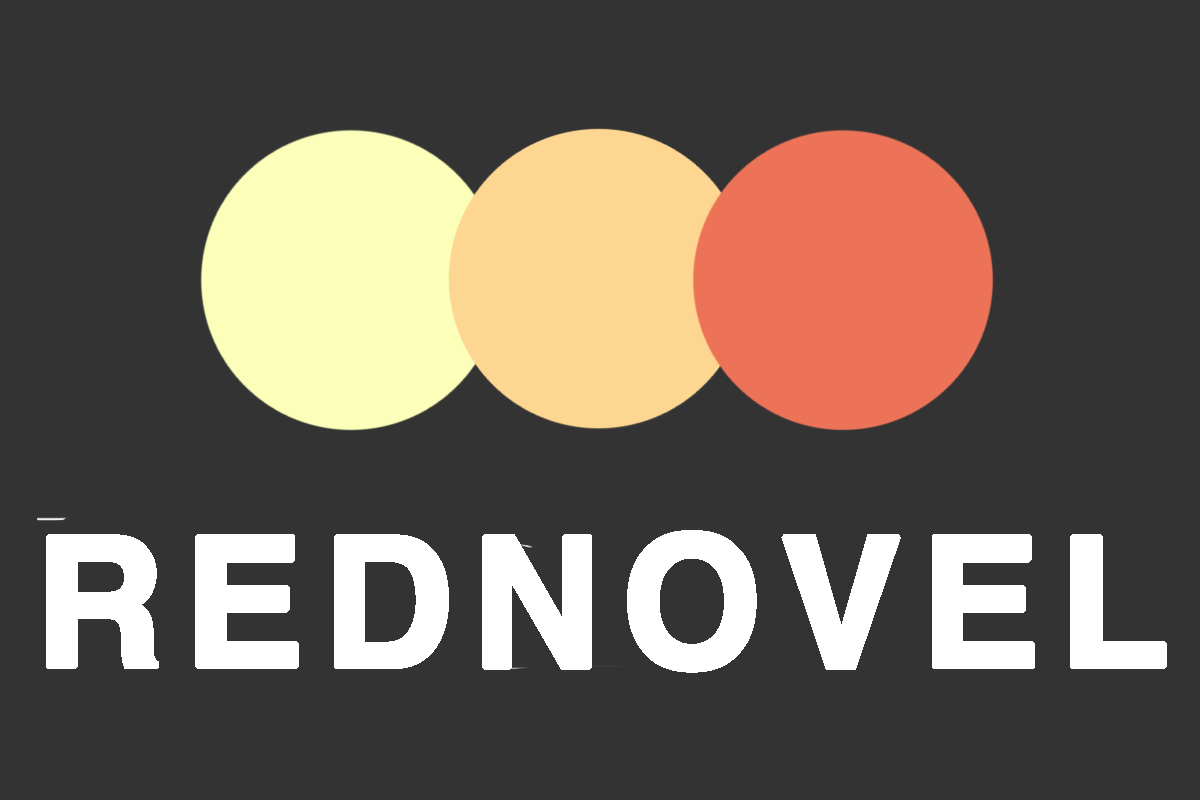
<style>
.page{position:relative;width:1200px;height:800px;background:#333333}
.page>*{position:absolute;margin:0}
.t1{font:180px "Helvetica-Bold";letter-spacing:0.08em;color:#ffffff;font-weight:bold}
</style>
<div class="page">
<p class="t1" style="left:46px;top:530px;width:1121px;height:143px">REDNOVEL</p>
</div>
